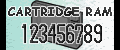
<style>
.page{position:relative;width:120px;height:50px}
.page>*{position:absolute;margin:0}
.t1{font:12px "ComicSansMS-Bold";color:#313131}
</style>
<div class="page">
<p class="t1" style="left:8px;top:7px;width:104px;height:9px">CARTRIDGE RAM</p>
</div>
